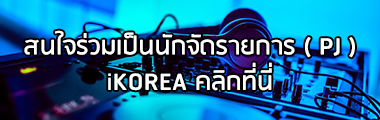
<style>
.page{position:relative;width:380px;height:120px}
.page>*{position:absolute;margin:0}
.t1{font:29.6px "RSU-Bold";color:#ffffff}
</style>
<div class="page">
<p class="t1" style="left:24px;top:30px;width:331px;height:61px;text-align:center">สนใจร่วมเป็นนักจัดรายการ ( PJ )<br>iKOREA คลิกที่นี่</p>
</div>
